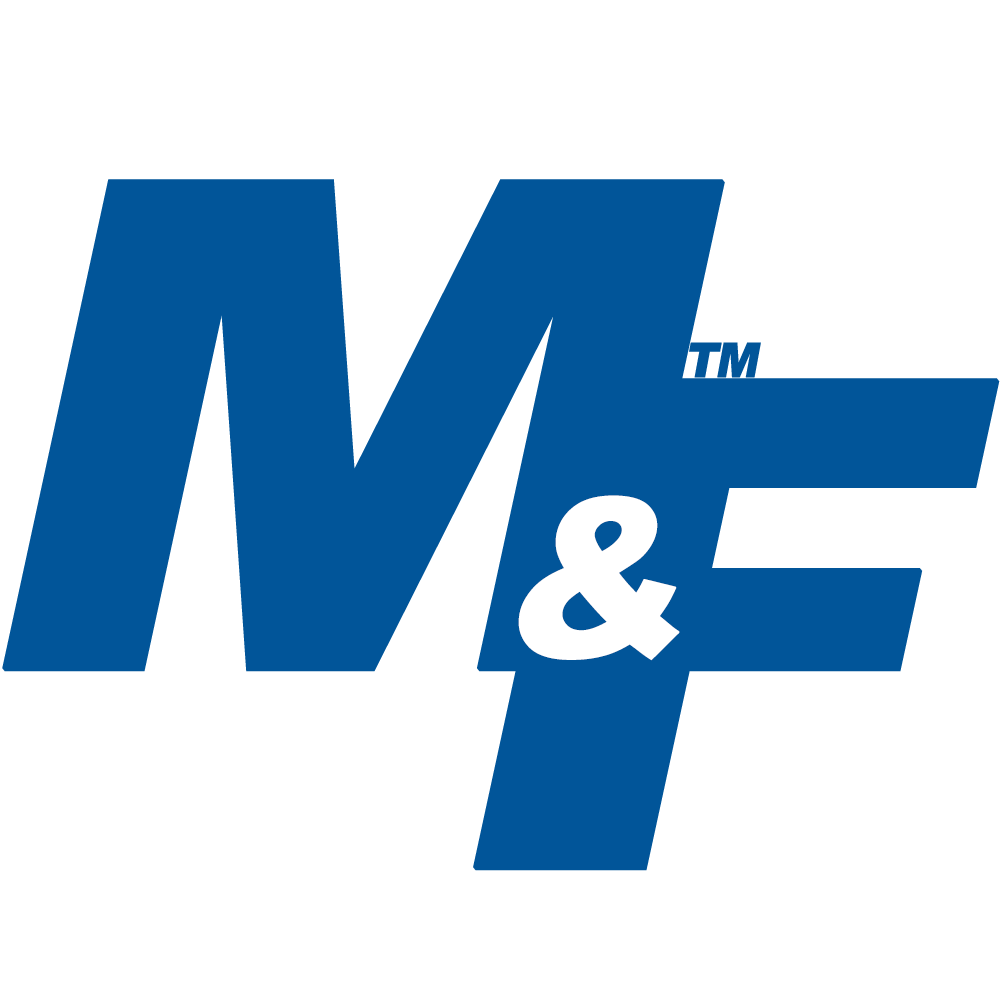
<style>
.page{position:relative;width:1000px;height:1000px;background:#ffffff}
.page>*{position:absolute;margin:0}
.t1{font:680px "Arial-Black";letter-spacing:-0.08em;color:#015599;font-weight:bold;font-style:italic;scale:1.12 1}
.t2{font:48px "Arial-Black";letter-spacing:-0.08em;color:#015599;font-weight:bold;font-style:italic;scale:0.95 1}
.t3{font:220px "Arial-Black";letter-spacing:-0.08em;color:#ffffff;font-weight:bold;font-style:italic;scale:0.95 1}
</style>
<div class="page">
<p class="t1" style="left:2px;top:179px;width:723px;height:493px">M</p>
<p class="t2" style="left:689px;top:342px;width:72px;height:36px">TM</p>
<p class="t1" style="left:473px;top:378px;width:527px;height:493px">F</p>
<p class="t3" style="left:518px;top:495px;width:162px;height:166px">&amp;</p>
</div>
